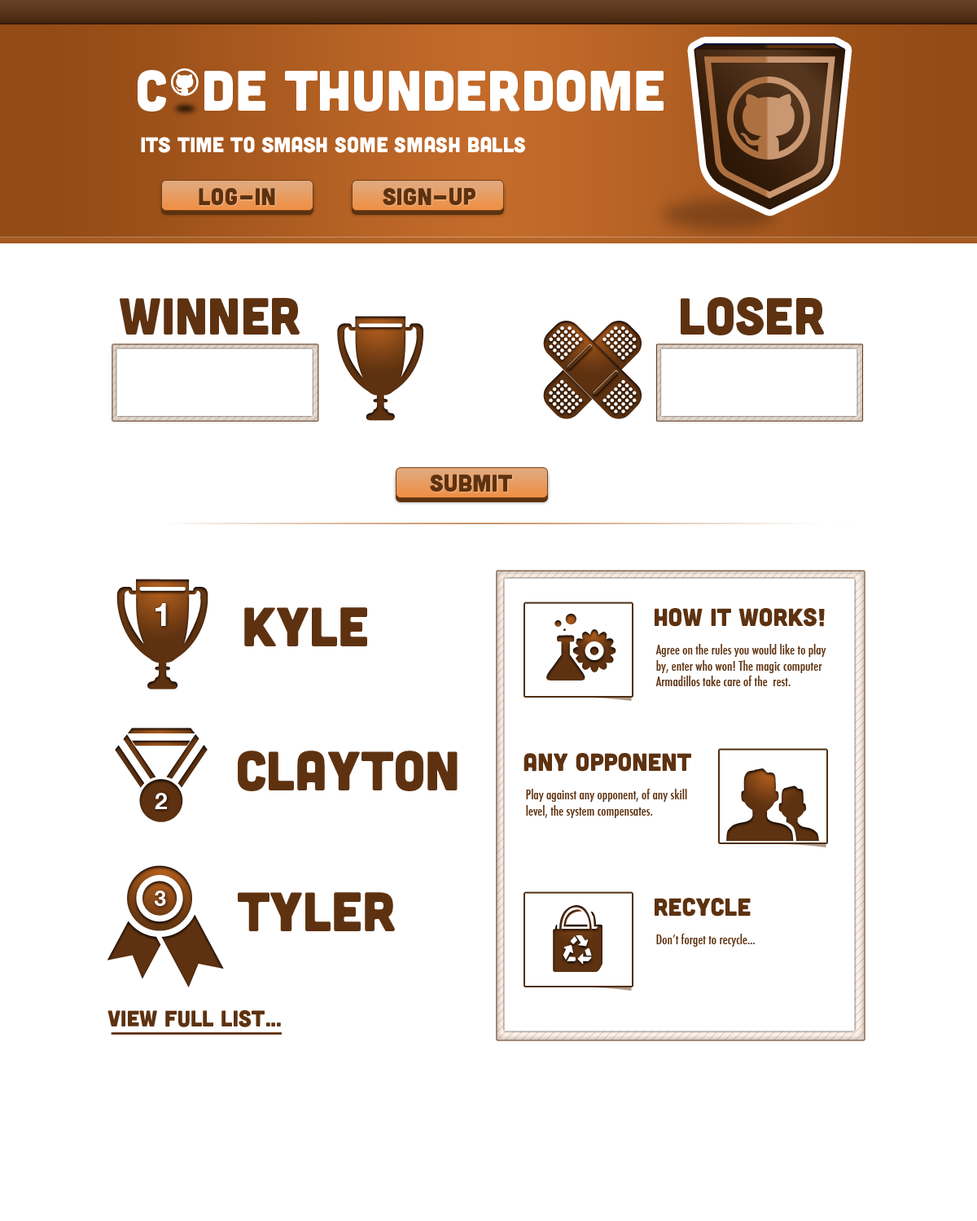
<style>
.page{position:relative;width:977px;height:1221px;background:#ffffff}
.page>*{position:absolute;margin:0}
.t1{font:57px "Cubano-Regular";color:#ffffff}
.t2{font:21.3px "Cubano-Regular";color:#ffffff}
.t3{font:24.1px "Cubano-Regular";color:#5e3210}
.t4{font:51.9px "Cubano-Regular";color:#5e3210}
.t5{font:32.7px "HelveticaNeue-Bold";color:#ffffff}
.t6{font:55.4px "Cubano-Regular";color:#5e3210}
.t7{font:24.7px "Cubano-Regular";color:#5e3210}
.t8{font:13.1px "Futura-CondensedMedium";color:#5e3210}
.t9{font:22.8px "HelveticaNeue-Bold";color:#ffffff}
.t10{font:21.1px "HelveticaNeue-Bold";color:#ffffff}
.t11{font:22.7px "Cubano-Regular";color:#5e3210}
</style>
<div class="page">
<p class="t1" style="left:138px;top:70px;width:525px;height:42px">C  de Thunderdome</p>
<p class="t2" style="left:141px;top:137px;width:384px;height:16px">Its time to smash some smash balls</p>
<p class="t3" style="left:199px;top:188px;width:76px;height:17px">Log-In</p>
<p class="t3" style="left:383px;top:187px;width:92px;height:18px">Sign-Up</p>
<p class="t4" style="left:120px;top:298px;width:180px;height:37px">Winner</p>
<p class="t4" style="left:680px;top:297px;width:144px;height:38px">loser</p>
<p class="t3" style="left:430px;top:474px;width:82px;height:18px">Submit</p>
<p class="t5" style="left:155px;top:603px;width:11px;height:23px">1</p>
<p class="t6" style="left:244px;top:607px;width:123px;height:39px">Kyle</p>
<p class="t7" style="left:654px;top:608px;width:170px;height:19px">How it works!</p>
<p class="t8" style="left:655px;top:644px;width:171px;height:42px">Agree on the rules you would like to play by, enter who won! The magic computer Armadillos take care of the  rest.</p>
<p class="t6" style="left:238px;top:750px;width:219px;height:41px">Clayton</p>
<p class="t7" style="left:523px;top:753px;width:168px;height:19px">Any opponent</p>
<p class="t9" style="left:155px;top:793px;width:12px;height:16px">2</p>
<p class="t8" style="left:526px;top:789px;width:161px;height:29px">Play against any opponent, of any skill level, the system compensates.</p>
<p class="t10" style="left:155px;top:890px;width:11px;height:16px">3</p>
<p class="t6" style="left:238px;top:892px;width:157px;height:39px">Tyler</p>
<p class="t7" style="left:654px;top:898px;width:96px;height:18px">Recycle</p>
<p class="t8" style="left:656px;top:934px;width:99px;height:13px">Don’t forget to recycle...</p>
<p class="t11" style="left:107px;top:1010px;width:174px;height:17px">view full list...</p>
</div>
